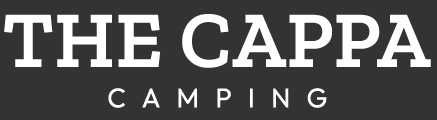
<style>
.page{position:relative;width:437px;height:120px;background:#333333}
.page>*{position:absolute;margin:0}
.t1{font:80px "ZillaSlab-SemiBold";letter-spacing:0.005em;color:#ffffff}
.t2{font:27px "Outfit-Regular";letter-spacing:0.6em;color:#ffffff}
</style>
<div class="page">
<p class="t1" style="left:4px;top:14px;width:427px;height:54px">THE CAPPA</p>
<p class="t2" style="left:108px;top:88px;width:219px;height:20px">CAMPING</p>
</div>
